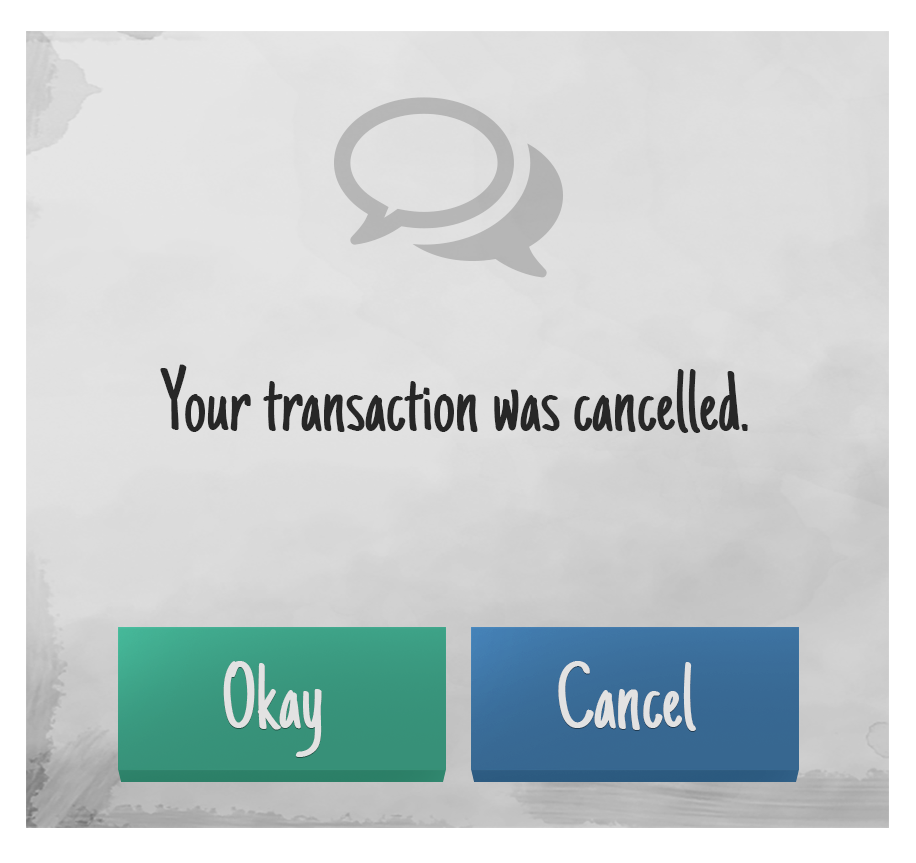
<style>
.page{position:relative;width:916px;height:863px}
.page>*{position:absolute;margin:0}
.t1{font:89.3px "JustAnotherHand-Regular";color:#272727}
.t2{font:94.4px "JustAnotherHand-Regular";color:#e2e2e2}
</style>
<div class="page">
<p class="t1" style="left:160px;top:364px;width:588px;height:69px">Your transaction was cancelled.</p>
<p class="t2" style="left:223px;top:661px;width:99px;height:96px">Okay</p>
<p class="t2" style="left:558px;top:661px;width:138px;height:70px">Cancel</p>
</div>
